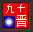
<style>
.page{position:relative;width:33px;height:32px;background:#f20000}
.page>*{position:absolute;margin:0}
.t1{font:10.4px "SimSun";color:#ffffff}
.t2{font:11.7px "SimSun";color:#ffffff}
</style>
<div class="page">
<p class="t1" style="left:6px;top:4px;width:19px;height:9px">九十</p>
<p class="t2" style="left:16px;top:15px;width:11px;height:12px">晋</p>
</div>
